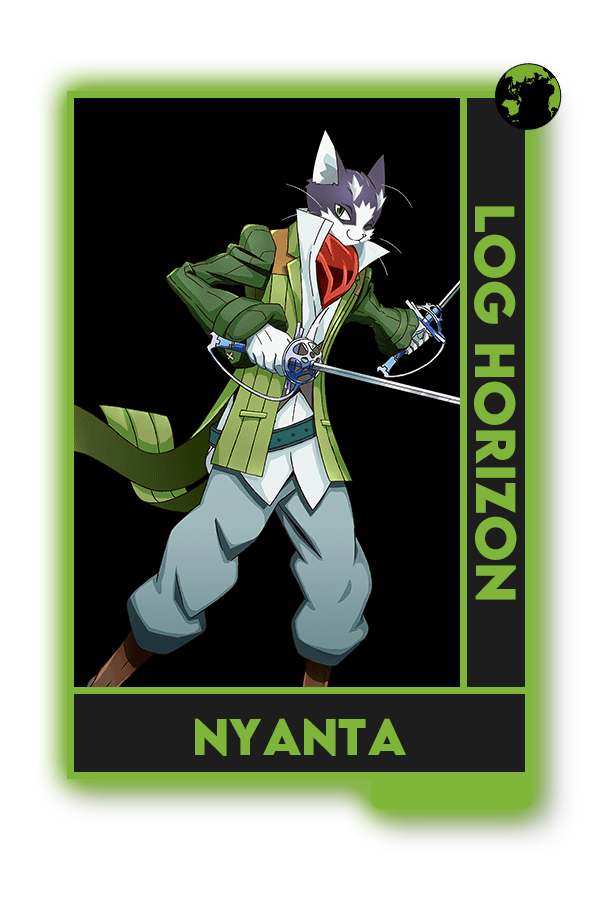
<style>
.page{position:relative;width:600px;height:900px;background:#000000}
.page>*{position:absolute;margin:0}
.t1{font:50px "LEMONMILK-Bold";color:#7fad41}
.t2{font:45.8px "LEMONMILK-Bold";color:#7fad41}
</style>
<div class="page">
<p class="t1" style="left:474px;top:206px;width:43px;height:394px;rotate:90deg">Log Horizon</p>
<p class="t2" style="left:195px;top:718px;width:211px;height:38px">Nyanta</p>
</div>
